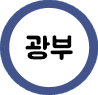
<style>
.page{position:relative;width:98px;height:95px;background:#ffffff}
.page>*{position:absolute;margin:0}
.t1{font:30px "BMJUA";color:#000000}
</style>
<div class="page">
<p class="t1" style="left:25px;top:35px;width:48px;height:25px">광부</p>
</div>
